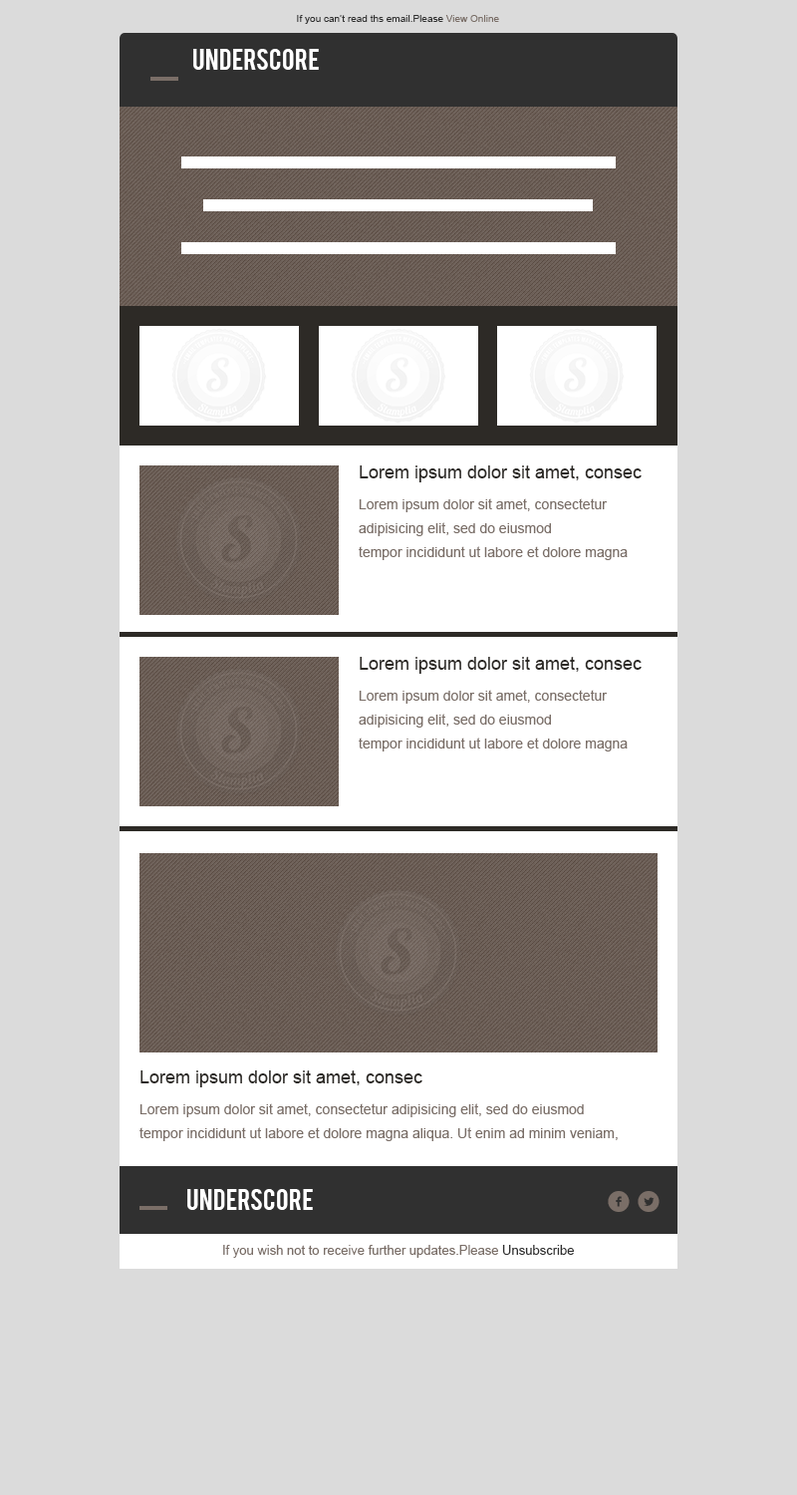
<style>
.page{position:relative;width:797px;height:1495px;background:#dbdbdb}
.page>*{position:absolute;margin:0}
.t1{font:10px "ArialMT";color:#303030}
.t2{font:10px "ArialMT";color:#303030;text-transform:uppercase}
.t3{font:10px "ArialMT";color:#7a6e67}
.t4{font:23.9px "Bebas";color:#ffffff;text-transform:uppercase}
.t5{font:17.9px "ArialMT";color:#2d2a26}
.t6{font:14px/23.9px "ArialMT";color:#7a6e67}
.t7{font:29.9px "Socialico";color:#7a6e67}
.t8{font:13px "ArialMT";color:#7a6e67}
.t9{font:13px "ArialMT";color:#303030}
</style>
<div class="page">
<p class="t1" style="left:297px;top:15px;width:202px;height:9px"><span class="t2">I</span>f you can’t read ths email.Please <span class="t3">View Online</span></p>
<p class="t4" style="left:193px;top:49px;width:126px;height:21px">Underscore</p>
<p class="t5" style="left:360px;top:466px;width:282px;height:16px">Lorem ipsum dolor sit amet, consec</p>
<p class="t6" style="left:359px;top:498px;width:269px;height:62px">Lorem ipsum dolor sit amet, consectetur adipisicing elit, sed do eiusmod<br>tempor incididunt ut labore et dolore magna</p>
<p class="t5" style="left:360px;top:657px;width:282px;height:17px">Lorem ipsum dolor sit amet, consec</p>
<p class="t6" style="left:359px;top:690px;width:269px;height:62px">Lorem ipsum dolor sit amet, consectetur adipisicing elit, sed do eiusmod<br>tempor incididunt ut labore et dolore magna</p>
<p class="t5" style="left:141px;top:1071px;width:282px;height:17px">Lorem ipsum dolor sit amet, consec</p>
<p class="t6" style="left:140px;top:1104px;width:478px;height:37px">Lorem ipsum dolor sit amet, consectetur adipisicing elit, sed do eiusmod<br>tempor incididunt ut labore et dolore magna aliqua. Ut enim ad minim veniam,</p>
<p class="t4" style="left:187px;top:1189px;width:126px;height:21px">Underscore</p>
<p class="t7" style="left:608px;top:1191px;width:22px;height:21px">f</p>
<p class="t7" style="left:638px;top:1191px;width:22px;height:21px">l</p>
<p class="t8" style="left:223px;top:1245px;width:351px;height:13px">If you wish not to receive further updates.Please <span class="t9">Unsubscribe</span></p>
</div>
